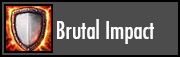
<style>
.page{position:relative;width:180px;height:57px;background:#4c4c4c}
.page>*{position:absolute;margin:0}
.t1{font:24px "FuturaCondensed";color:#ffffff}
</style>
<div class="page">
<p class="t1" style="left:57px;top:19px;width:97px;height:25px">Brutal Impact</p>
</div>
